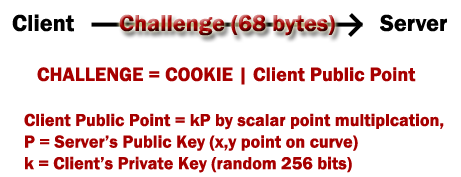
<style>
.page{position:relative;width:461px;height:177px;background:#ffffff}
.page>*{position:absolute;margin:0}
.t1{font:24px "FranklinGothic-Demi";color:#000000}
.t2{font:24px "FranklinGothic-Demi"}
.t3{font:20px "FranklinGothic-Demi";color:#a70000}
.t4{font:18px "FranklinGothic-Demi";color:#a70000}
</style>
<div class="page">
<p class="t1" style="left:12px;top:14px;width:62px;height:18px">Client</p>
<p class="t2" style="left:119px;top:14px;width:216px;height:22px">Challenge (68 bytes)</p>
<p class="t1" style="left:380px;top:14px;width:67px;height:18px">Server</p>
<p class="t3" style="left:37px;top:67px;width:379px;height:18px">CHALLENGE = COOKIE | Client Public Point</p>
<p class="t4" style="left:24px;top:113px;width:420px;height:60px">Client Public Point = kP by scalar point multiplcation,<br>P = Server’s Public Key (x,y point on curve)<br>k = Client’s Private Key (random 256 bits)</p>
</div>
